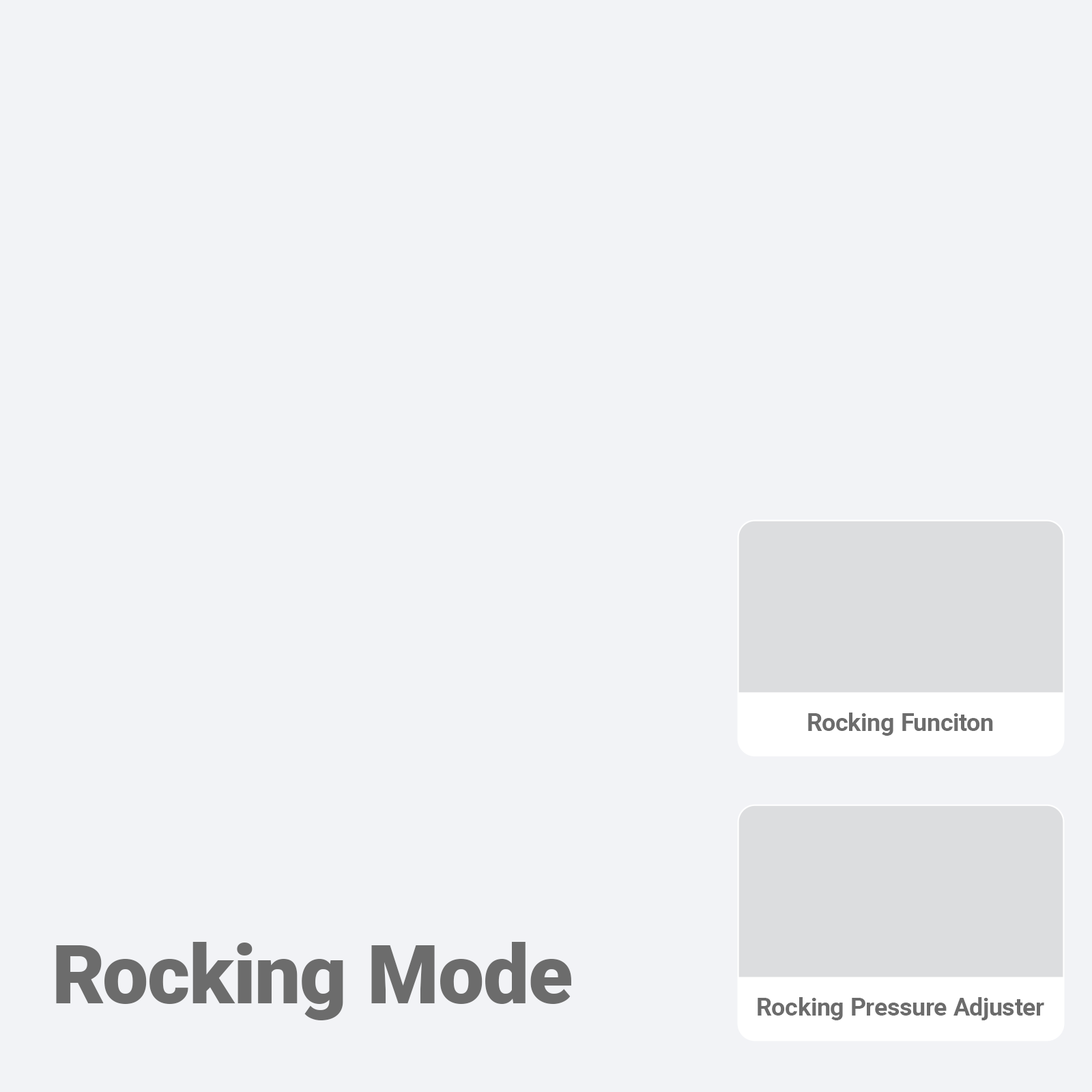
<style>
.page{position:relative;width:1092px;height:1092px;background:#f2f3f6}
.page>*{position:absolute;margin:0}
.t1{font:24.7px "Roboto-Bold";color:#6c6c6c}
.t2{font:82px "Roboto-Black";color:#6c6c6c}
</style>
<div class="page">
<p class="t1" style="left:808px;top:713px;width:185px;height:23px">Rocking Funciton</p>
<p class="t2" style="left:56px;top:942px;width:515px;height:78px">Rocking Mode</p>
<p class="t1" style="left:758px;top:997px;width:286px;height:23px">Rocking Pressure Adjuster</p>
</div>
